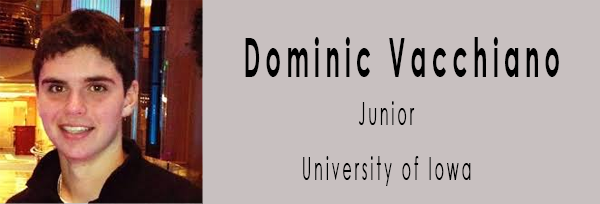
<style>
.page{position:relative;width:600px;height:204px;background:#c8c0c0}
.page>*{position:absolute;margin:0}
.t1{font:54px "CenturyGothic-Bold";letter-spacing:0.22em;color:#000000;scale:0.44 1}
.t2{font:31.5px "CenturyGothic";letter-spacing:0.22em;color:#000000;scale:0.44 1}
</style>
<div class="page">
<p class="t1" style="left:245px;top:37px;width:314px;height:40px">Dominic Vacchiano</p>
<p class="t2" style="left:359px;top:101px;width:56px;height:24px">Junior</p>
<p class="t2" style="left:303px;top:156px;width:168px;height:30px">University of Iowa</p>
</div>
